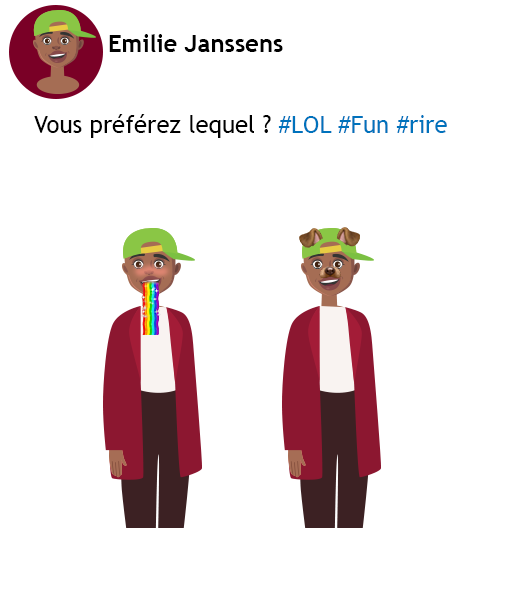
<style>
.page{position:relative;width:512px;height:616px;background:#ffffff}
.page>*{position:absolute;margin:0}
.t1{font:24px "TrebuchetMS-Bold";color:#000000}
.t2{font:24px "TrebuchetMS";color:#000000}
.t3{font:24px "TrebuchetMS";color:#0072bc}
</style>
<div class="page">
<p class="t1" style="left:109px;top:34px;width:174px;height:18px">Emilie Janssens</p>
<p class="t2" style="left:34px;top:114px;width:413px;height:24px">Vous préférez lequel ? <span class="t3">#LOL #Fun #rire</span></p>
</div>
